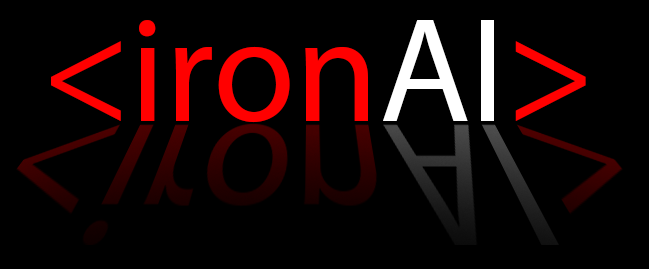
<style>
.page{position:relative;width:649px;height:269px;background:#000000}
.page>*{position:absolute;margin:0}
.t1{font:150px "MyriadPro-Regular";color:#ff0000}
.t2{font:150px "MyriadPro-Regular";color:#ffffff}
</style>
<div class="page">
<p class="t1" style="left:51px;top:20px;width:535px;height:103px">&lt;iron<span class="t2">AI</span>&gt;</p>
</div>
